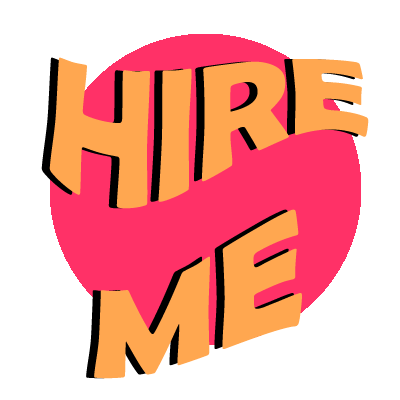
<style>
.page{position:relative;width:400px;height:400px;background:#ffffff}
.page>*{position:absolute;margin:0}
.t1{font:150px "BerlinSansFBDemi-Bold";color:#ffa750}
</style>
<div class="page">
<p class="t1" style="left:41px;top:57px;width:320px;height:322px;text-align:center">HIRE <br> ME</p>
<p class="t1" style="left:49px;top:57px;width:320px;height:322px;text-align:center">HIRE <br> ME</p>
</div>
